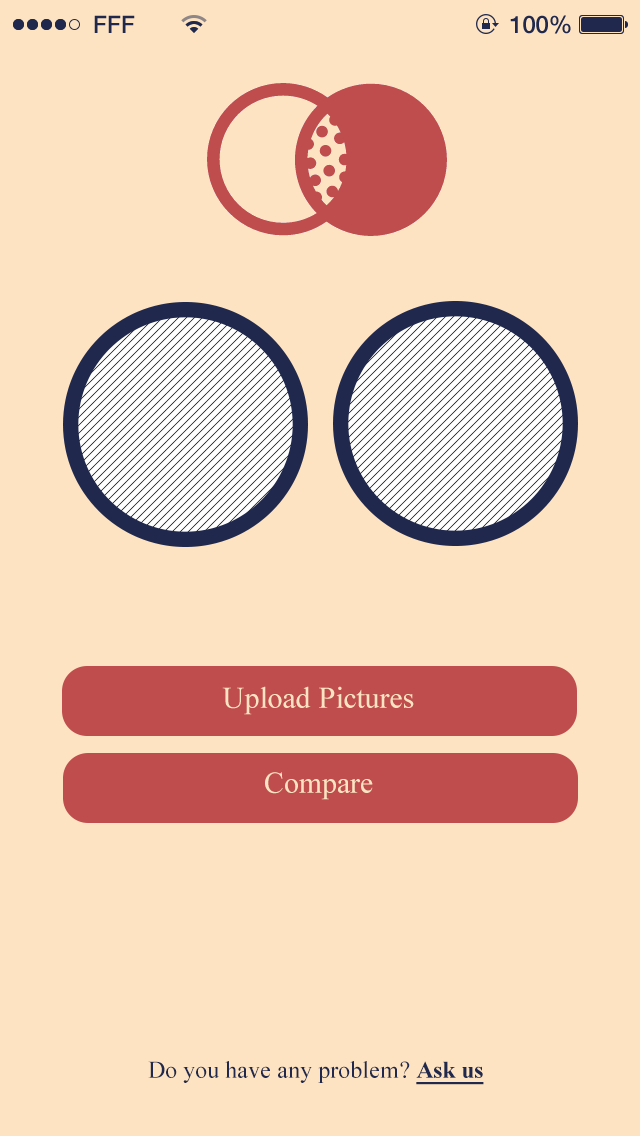
<style>
.page{position:relative;width:640px;height:1136px;background:#fde3c1}
.page>*{position:absolute;margin:0}
.t1{font:24px "HelveticaNeue-Medium";color:#20294d}
.t2{font:30px "TimesNewRomanPSMT";color:#fde3c1}
.t3{font:24px "TimesNewRomanPSMT";color:#20294d}
.t4{font:24px "TimesNewRomanPS-BoldMT";color:#20294d;text-decoration:underline}
</style>
<div class="page">
<p class="t1" style="left:94px;top:15px;width:41px;height:18px">FFF</p>
<p class="t1" style="left:510px;top:15px;width:61px;height:19px">100%</p>
<p class="t2" style="left:222px;top:686px;width:192px;height:29px">Upload Pictures</p>
<p class="t2" style="left:265px;top:772px;width:108px;height:28px">Compare</p>
<p class="t3" style="left:148px;top:1061px;width:336px;height:24px">Do you have any problem? <span class="t4">Ask us</span></p>
</div>
